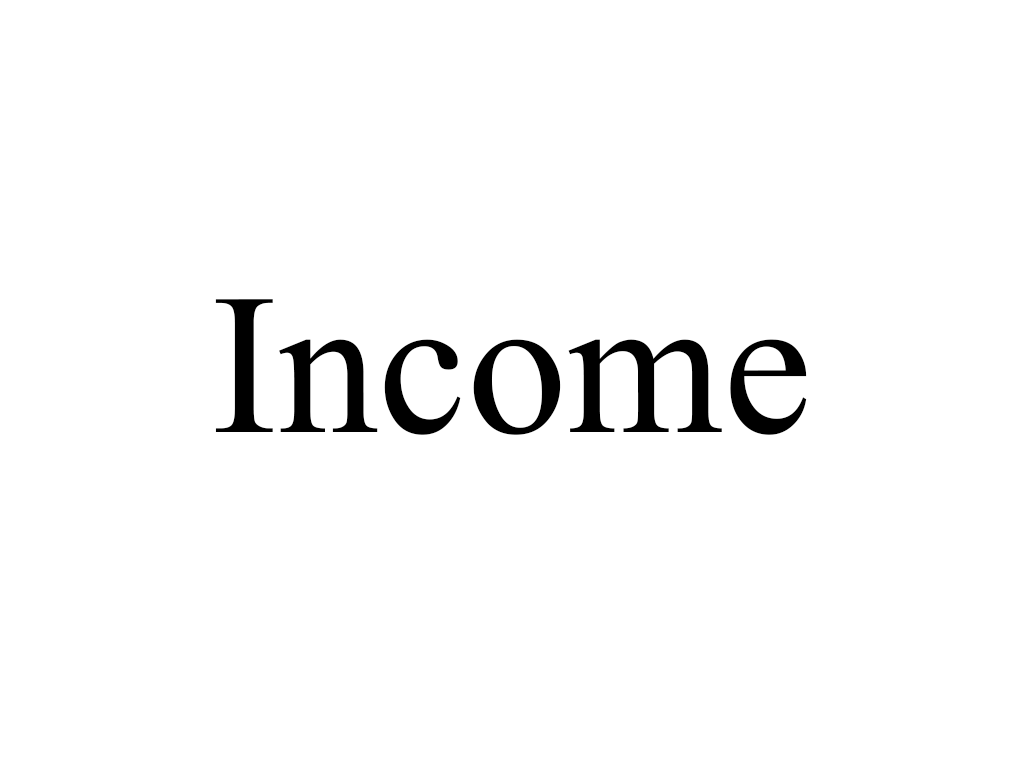
<style>
.page{position:relative;width:1024px;height:768px;background:#ffffff}
.page>*{position:absolute;margin:0}
.t1{font:303.8px "AngsanaNew";color:#000000}
</style>
<div class="page">
<p class="t1" style="left:215px;top:299px;width:592px;height:136px">Income</p>
</div>
